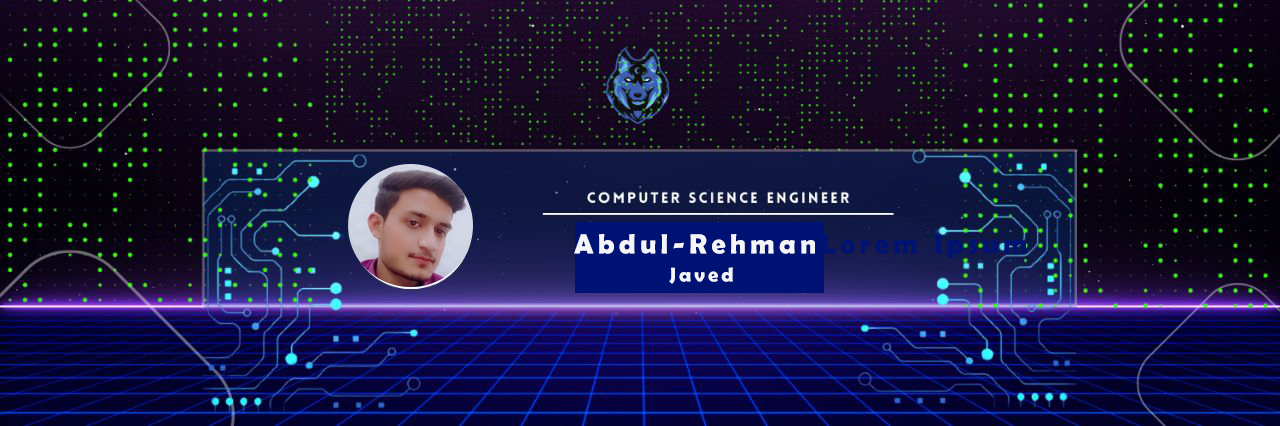
<style>
.page{position:relative;width:1280px;height:426px}
.page>*{position:absolute;margin:0}
.t1{font:28px "BerlinSansFBDemi-Bold";letter-spacing:0.16em;color:#f4f5f8}
.t2{font:28px "BerlinSansFBDemi-Bold";letter-spacing:0.16em;color:#001375}
.t3{font:20px "BerlinSansFBDemi-Bold";letter-spacing:0.16em;color:#f4f5f8}
</style>
<div class="page">
<p class="t1" style="left:574px;top:234px;width:453px;height:24px">Abdul-Rehman<span class="t2">Lorem Ipsum</span></p>
<p class="t3" style="left:669px;top:267px;width:64px;height:17px">Javed</p>
</div>
